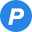
<style>
.page{position:relative;width:32px;height:32px;background:#2884e3}
.page>*{position:absolute;margin:0}
.t1{font:24.3px "ProximaNova-BoldIt";color:#ffffff}
</style>
<div class="page">
<p class="t1" style="left:8px;top:8px;width:16px;height:17px">P</p>
</div>
